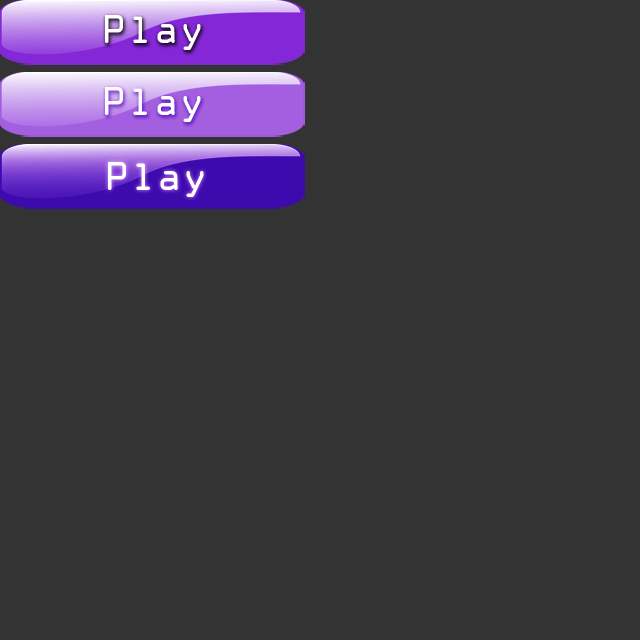
<style>
.page{position:relative;width:640px;height:640px;background:#333333}
.page>*{position:absolute;margin:0}
.t1{font:36px "OCRAStd";color:#ffffff}
</style>
<div class="page">
<p class="t1" style="left:105px;top:15px;width:96px;height:35px">Play</p>
<p class="t1" style="left:105px;top:87px;width:96px;height:35px">Play</p>
<p class="t1" style="left:108px;top:162px;width:96px;height:35px">Play</p>
</div>
